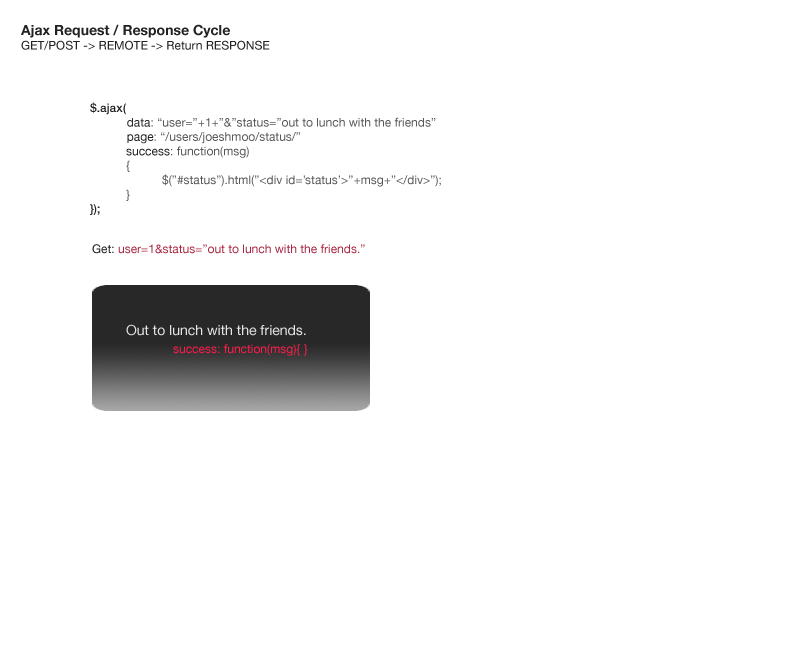
<style>
.page{position:relative;width:792px;height:648px;background:#ffffff}
.page>*{position:absolute;margin:0}
.t1{font:12px "HelveticaNeue";color:#222222}
.t2{font:14px "HelveticaNeue-Bold";color:#222222}
.t3{font:12px "HelveticaNeue";color:#585858}
.t4{font:12px "HelveticaNeue-Medium";color:#1d1c1c}
.t5{font:12px "HelveticaNeue";color:#292828}
.t6{font:12px "HelveticaNeue";color:#202020}
.t7{font:12px "HelveticaNeue-Medium";color:#272626}
.t8{font:12px "HelveticaNeue";color:#aa2844}
.t9{font:14px "HelveticaNeue";color:#e5e5e5}
.t10{font:12px "HelveticaNeue";color:#fd1c4b}
</style>
<div class="page">
<p class="t1" style="left:21px;top:24px;width:249px;height:26px"><span class="t2">Ajax Request / Response Cycle<br></span>GET/POST -&gt; REMOTE -&gt; Return RESPONSE</p>
<p class="t3" style="left:90px;top:102px;width:351px;height:113px"><span class="t4">$.ajax( <br>           </span><span class="t5">data</span>: “user=”+1+”&amp;”status=”out to lunch with the friends”<br>           <span class="t6">page</span>: “/users/joeshmoo/status/”<br> <span class="t1">success</span>: function(msg)<br> {<br>  $(”#status”).html(”&lt;div id=’status’&gt;”+msg+”&lt;/div&gt;”);<br> }<br><span class="t7">});</span></p>
<p class="t8" style="left:92px;top:244px;width:273px;height:10px"><span class="t1">Get: </span>user=1&amp;status=”out to lunch with the friends.”</p>
<p class="t9" style="left:126px;top:324px;width:180px;height:12px">Out to lunch with the friends.</p>
<p class="t10" style="left:173px;top:344px;width:135px;height:12px">success: function(msg){ }</p>
</div>
